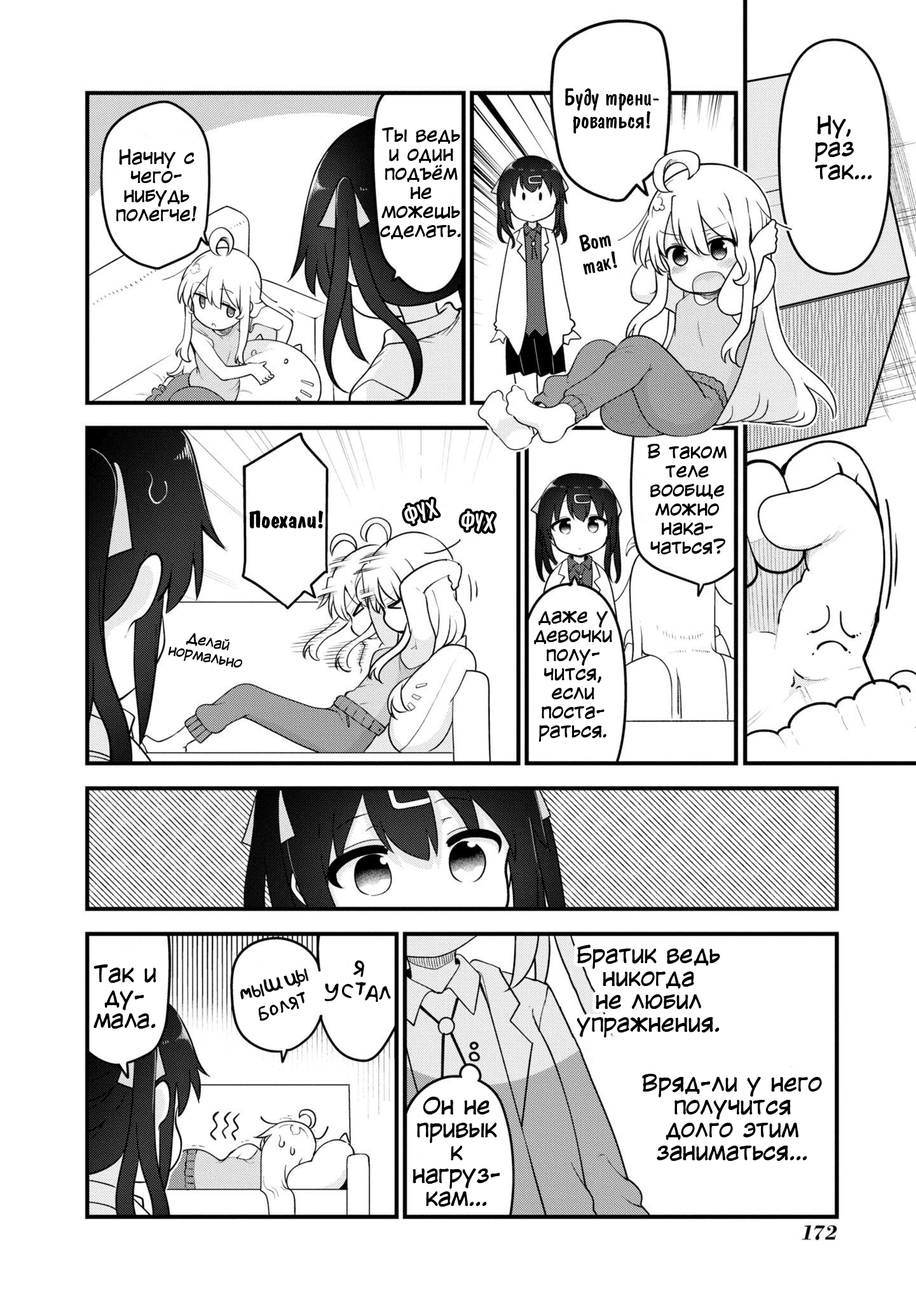
<style>
.page{position:relative;width:916px;height:1302px;background:#ffffff}
.page>*{position:absolute;margin:0}
.t1{font:22.9px/22.9px "ADomIno";color:#000000}
.t2{font:22.9px/22.9px "KuraiVoice2";color:#000000}
.t3{font:19.1px/19.1px "KuraiVoice2";color:#000000}
.t4{font:22.9px "ADomIno";color:#ffffff}
.t5{font:22.9px "ADomInoBold";color:#000000}
.t6{font:14px/15.3px "KuraiVoice2";color:#000000}
.t7{font:22.9px/22.9px "AkbarPlain";color:#000000}
.t8{font:19.1px/22.9px "AkbarPlain";color:#000000}
</style>
<div class="page">
<p class="t1" style="left:565px;top:88px;width:94px;height:45px;text-align:center">Буду трени-<br>роваться!</p>
<p class="t2" style="left:815px;top:115px;width:57px;height:65px;text-align:center">Ну,<br>раз<br>  так...</p>
<p class="t3" style="left:380px;top:127px;width:81px;height:113px;text-align:center">Ты ведь<br>и один<br>подъём<br>не<br>можешь<br>сделать.</p>
<p class="t3" style="left:116px;top:149px;width:81px;height:72px;text-align:center">Начну с чего-<br>нибудь полегче!</p>
<p class="t1" style="left:579px;top:235px;width:38px;height:40px;text-align:center;rotate:-12deg">Вот<br>так!</p>
<p class="t3" style="left:647px;top:444px;width:80px;height:110px;text-align:center">В таком теле вообще можно нака-<br>чаться?</p>
<p class="t4" style="left:404px;top:499px;width:35px;height:25px;rotate:-18deg">ФУХ</p>
<p class="t5" style="left:249px;top:510px;width:75px;height:18px">Поехали!</p>
<p class="t4" style="left:461px;top:510px;width:34px;height:21px;rotate:4deg">ФУХ</p>
<p class="t3" style="left:534px;top:610px;width:78px;height:132px;text-align:center">даже у девочки полу-<br>чится, если поста-<br>раться.</p>
<p class="t6" style="left:168px;top:633px;width:74px;height:35px;text-align:center;rotate:11deg">Делай<br>нормально</p>
<p class="t2" style="left:577px;top:945px;width:143px;height:92px;text-align:center">Братик ведь<br>никогда<br>не любил<br>упражнения.</p>
<p class="t2" style="left:93px;top:964px;width:63px;height:64px;text-align:center">Так и<br>ду-<br>мала.</p>
<p class="t7" style="left:324px;top:960px;width:67px;height:42px;text-align:center;rotate:5deg">я<br>устал</p>
<p class="t8" style="left:240px;top:968px;width:69px;height:53px;text-align:center;rotate:-19deg">мышцы<br>болят</p>
<p class="t2" style="left:642px;top:1074px;width:180px;height:87px;text-align:center">Вряд-ли у него<br>получится<br>долго этим<br>заниматься...</p>
<p class="t2" style="left:413px;top:1097px;width:87px;height:109px;text-align:center">Он не<br>привык<br>к<br>нагруз-<br>кам...</p>
</div>
